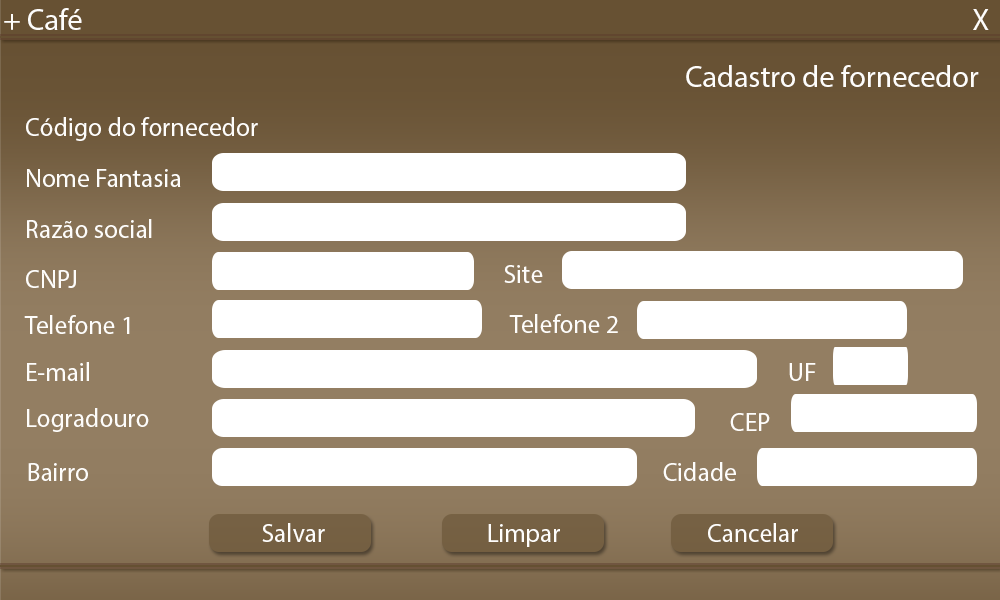
<style>
.page{position:relative;width:1000px;height:600px;background:#ffffff}
.page>*{position:absolute;margin:0}
.t1{font:30px "MyriadPro-Regular";color:#fefdfb}
.t2{font:30.1px "MyriadPro-Regular";color:#fefdfb}
.t3{font:29.9px "MyriadPro-Regular";color:#fefdfb}
.t4{font:25.7px "MyriadPro-Regular";color:#fefdfb}
.t5{font:55.1px "MyriadPro-Regular";color:#fefdfb}
</style>
<div class="page">
<p class="t1" style="left:4px;top:8px;width:78px;height:22px">+ Café</p>
<p class="t2" style="left:973px;top:9px;width:16px;height:21px">X</p>
<p class="t3" style="left:686px;top:65px;width:293px;height:22px">Cadastro de fornecedor</p>
<p class="t4" style="left:26px;top:117px;width:232px;height:24px">Código do fornecedor<br><span class="t5">Non</span></p>
<p class="t4" style="left:27px;top:169px;width:154px;height:18px">Nome Fantasia<br><span class="t5">Non</span></p>
<p class="t4" style="left:27px;top:219px;width:125px;height:19px">Razão social<br><br><span class="t5">Non</span></p>
<p class="t4" style="left:26px;top:270px;width:50px;height:18px">CNPJ<br><span class="t5">Non</span></p>
<p class="t4" style="left:504px;top:265px;width:39px;height:18px">Site<br><br><br><span class="t5">Non</span></p>
<p class="t4" style="left:24px;top:315px;width:106px;height:19px">Telefone 1<br><span class="t5">Non</span></p>
<p class="t4" style="left:509px;top:314px;width:109px;height:19px">Telefone 2<br><br><span class="t5">Non</span></p>
<p class="t4" style="left:27px;top:362px;width:62px;height:19px">E-mail<br><br><span class="t5">Non</span></p>
<p class="t5" style="left:789px;top:363px;width:27px;height:18px"><span class="t4">UF<br><br><br></span>Non</p>
<p class="t4" style="left:27px;top:408px;width:122px;height:24px">Logradouro<br><br><span class="t5">Non</span></p>
<p class="t4" style="left:730px;top:413px;width:40px;height:18px">CEP<br><br><span class="t5">Non</span></p>
<p class="t4" style="left:663px;top:462px;width:73px;height:19px">Cidade<br><br><span class="t5">Non</span></p>
<p class="t4" style="left:28px;top:463px;width:60px;height:18px">Bairro<br><br><br><span class="t5">Non</span></p>
<p class="t4" style="left:262px;top:523px;width:63px;height:19px">Salvar<br><br><br><span class="t5">Non</span></p>
<p class="t4" style="left:488px;top:524px;width:72px;height:23px">Limpar<br><br><br><span class="t5">Non</span></p>
<p class="t4" style="left:708px;top:523px;width:90px;height:19px">Cancelar<br><br><br><br><span class="t5">Non</span></p>
</div>
